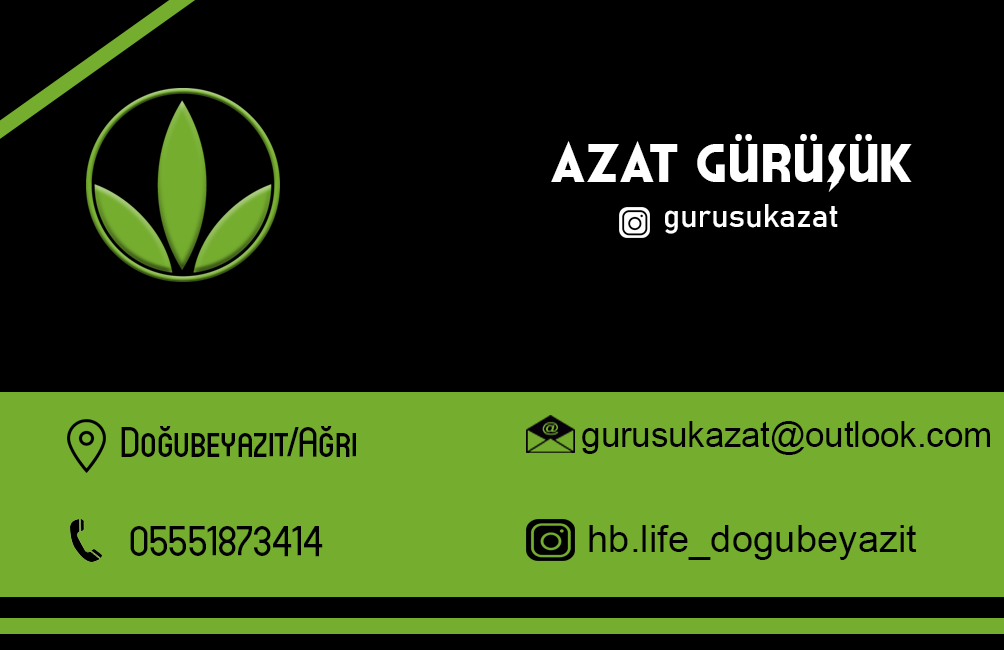
<style>
.page{position:relative;width:1004px;height:650px;background:#000000}
.page>*{position:absolute;margin:0}
.t1{font:67.4px "HonestJohns";color:#ffffff}
.t2{font:31.6px "Bahnschrift";color:#ffffff}
.t3{font:35.8px "ArialMT";color:#000000;scale:0.97 1}
.t4{font:41.7px "Circula-Medium";color:#000000}
.t5{font:38.3px "ArialMT";color:#000000}
</style>
<div class="page">
<p class="t1" style="left:551px;top:134px;width:361px;height:58px">azat gürüşük</p>
<p class="t2" style="left:665px;top:204px;width:173px;height:30px">gurusukazat</p>
<p class="t3" style="left:582px;top:421px;width:408px;height:34px">gurusukazat@outlook.com</p>
<p class="t4" style="left:121px;top:426px;width:235px;height:31px">Doğubeyazıt/Ağrı</p>
<p class="t4" style="left:130px;top:526px;width:193px;height:31px">05551873414</p>
<p class="t5" style="left:589px;top:525px;width:328px;height:35px">hb.life_dogubeyazit</p>
</div>
